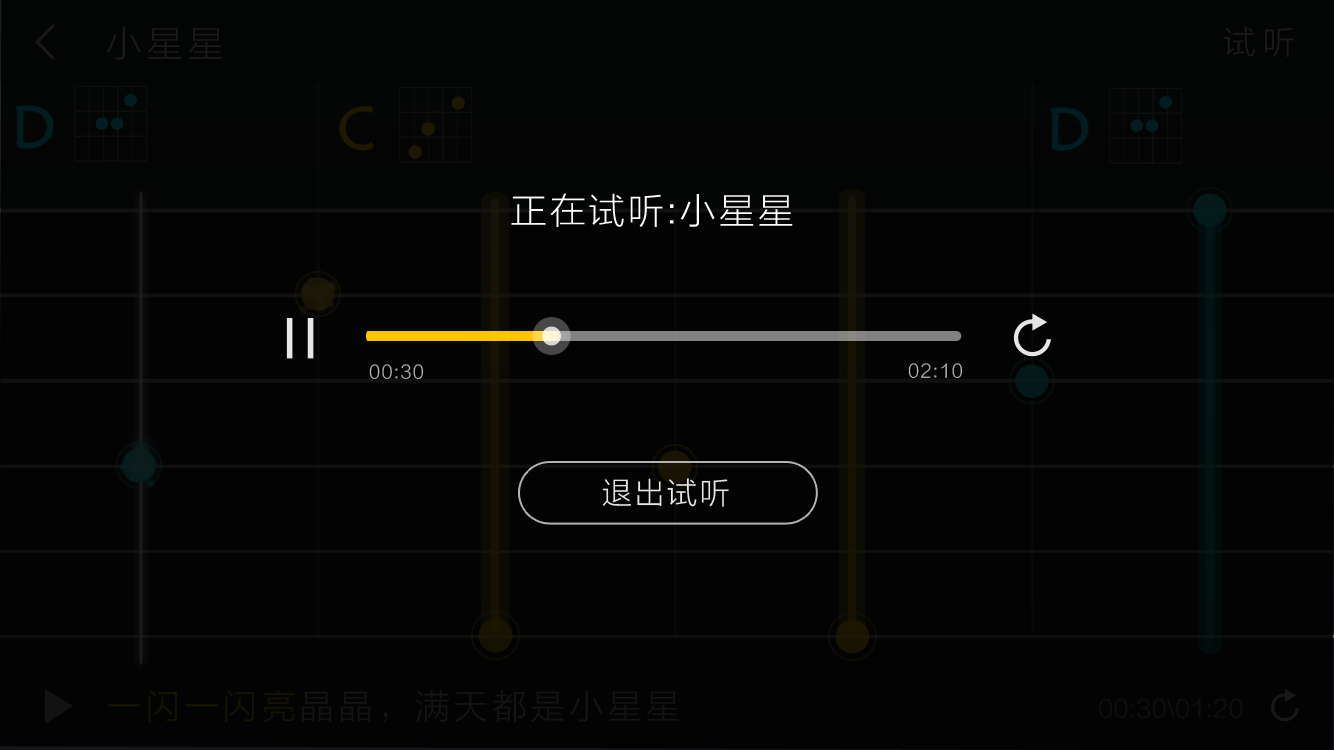
<style>
.page{position:relative;width:1334px;height:750px;background:#030304}
.page>*{position:absolute;margin:0}
.t1{font:36px "STHeitiSC-Light";letter-spacing:0.1em;color:#1a1a1a}
.t2{font:32px "STHeitiSC-Light";letter-spacing:0.2em;color:#1b1b1b}
.t3{font:60px "STXinwei";color:#011d1f}
.t4{font:60px "STXinwei";color:#1d1900}
.t5{font:36px "STHeitiSC-Medium";letter-spacing:0.05em;color:#ffffff}
.t6{font:18px "STHeitiSC-Light";letter-spacing:0.05em;color:#b9b9b9}
.t7{font:30px "STHeitiSC-Medium";letter-spacing:0.05em;color:#e6e6e6}
.t8{font:34px "STHeitiSC-Light";letter-spacing:0.1em;color:#141414}
.t9{font:24px "STHeitiSC-Light";color:#0f0f0f}
</style>
<div class="page">
<p class="t1" style="left:106px;top:27px;width:117px;height:33px">小星星</p>
<p class="t2" style="left:1224px;top:26px;width:70px;height:31px">试听</p>
<p class="t3" style="left:15px;top:105px;width:39px;height:44px">D</p>
<p class="t4" style="left:339px;top:106px;width:35px;height:45px">C</p>
<p class="t3" style="left:1050px;top:107px;width:39px;height:44px">D</p>
<p class="t5" style="left:511px;top:193px;width:282px;height:34px">正在试听:小星星</p>
<p class="t6" style="left:369px;top:364px;width:55px;height:15px">00:30</p>
<p class="t6" style="left:908px;top:363px;width:55px;height:15px">02:10</p>
<p class="t7" style="left:602px;top:478px;width:127px;height:29px">退出试听</p>
<p class="t8" style="left:108px;top:689px;width:571px;height:34px">一闪一闪亮晶晶，满天都是小星星</p>
<p class="t9" style="left:1099px;top:698px;width:144px;height:21px">00:30\01:20</p>
</div>
